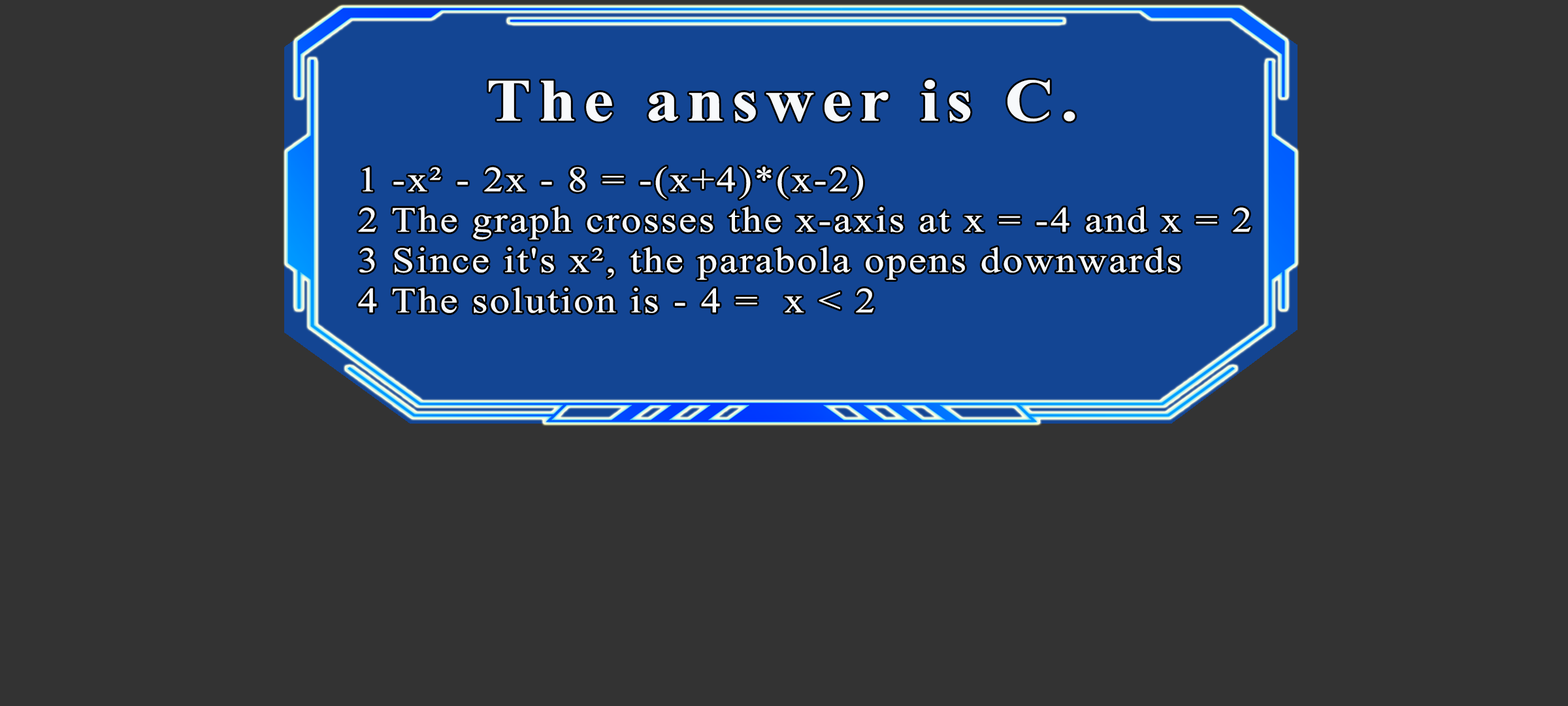
<style>
.page{position:relative;width:1568px;height:706px;background:#333333}
.page>*{position:absolute;margin:0}
.t1{font:59.9px "TimesNewRomanPS-BoldMT";letter-spacing:0.115em;color:#f7f9fb;scale:1.12 1}
.t2{font:35.6px/40.3px "TimesNewRomanPSMT";letter-spacing:0.055em;color:#f7f9fb;scale:1.12 1}
</style>
<div class="page">
<p class="t1" style="left:489px;top:80px;width:586px;height:42px">The answer is C.</p>
<p class="t2" style="left:358px;top:166px;width:893px;height:147px">1 -x² - 2x - 8 = -(x+4)*(x-2)<br>2 The graph crosses the x-axis at x = -4 and x = 2<br>3 Since it's x², the parabola opens downwards<br>4 The solution is - 4 =  x &lt; 2</p>
</div>
